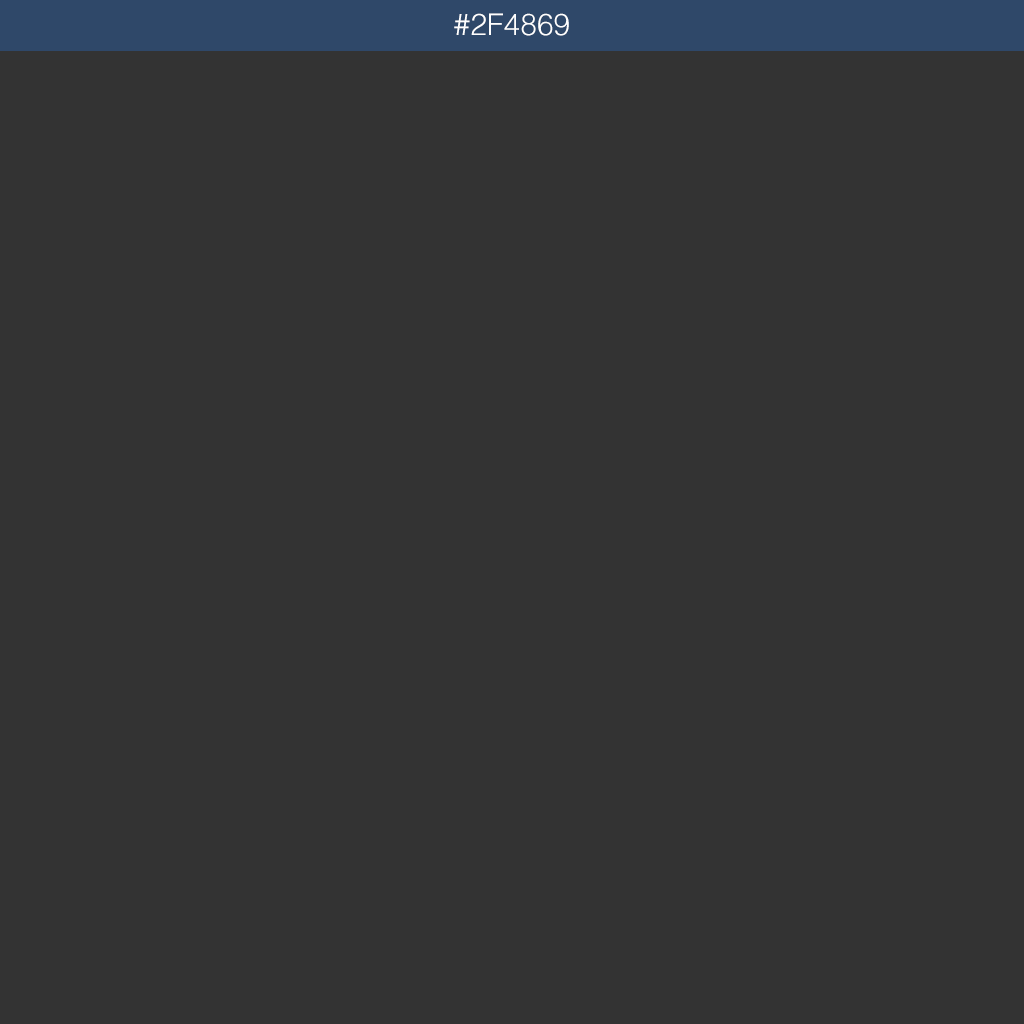
<style>
.page{position:relative;width:1024px;height:1024px;background:#333333}
.page>*{position:absolute;margin:0}
.t1{font:30px "Helvetica-Light";color:#ffffff}
</style>
<div class="page">
<p class="t1" style="left:454px;top:13px;width:115px;height:23px">#2F4869</p>
</div>
